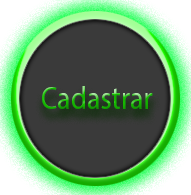
<style>
.page{position:relative;width:191px;height:195px;background:#3a3a3a}
.page>*{position:absolute;margin:0}
.t1{font:32px "MyriadPro-Regular";scale:0.89 1}
</style>
<div class="page">
<p class="t1" style="left:42px;top:86px;width:111px;height:23px">Cadastrar</p>
</div>
